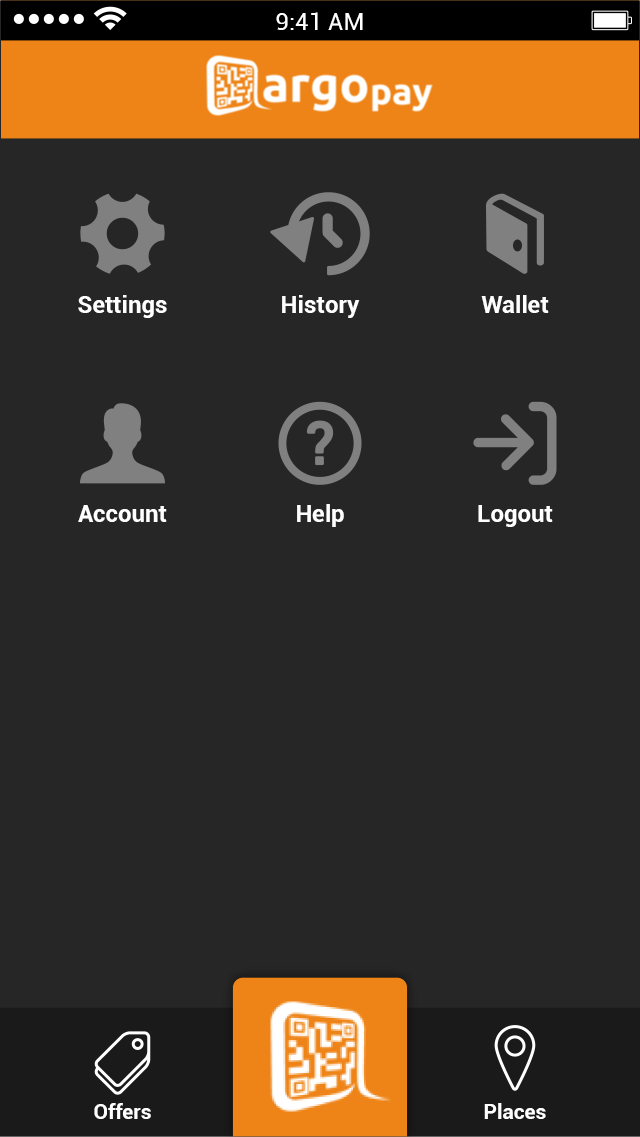
<style>
.page{position:relative;width:640px;height:1137px;background:#262626}
.page>*{position:absolute;margin:0}
.t1{font:24px "Roboto-Regular";color:#ffffff}
.t2{font:24px "Roboto-Bold";color:#ffffff}
.t3{font:21px "Roboto-Bold";color:#ffffff}
</style>
<div class="page">
<p class="t1" style="left:276px;top:12px;width:87px;height:18px">9:41 AM</p>
<p class="t2" style="left:78px;top:295px;width:89px;height:23px">Settings</p>
<p class="t2" style="left:282px;top:295px;width:78px;height:23px">History</p>
<p class="t2" style="left:481px;top:295px;width:68px;height:18px">Wallet</p>
<p class="t2" style="left:78px;top:505px;width:89px;height:17px">Account</p>
<p class="t2" style="left:297px;top:504px;width:47px;height:23px">Help</p>
<p class="t2" style="left:478px;top:505px;width:75px;height:22px">Logout</p>
<p class="t3" style="left:94px;top:1103px;width:57px;height:16px">Offers</p>
<p class="t3" style="left:484px;top:1103px;width:62px;height:16px">Places</p>
</div>
